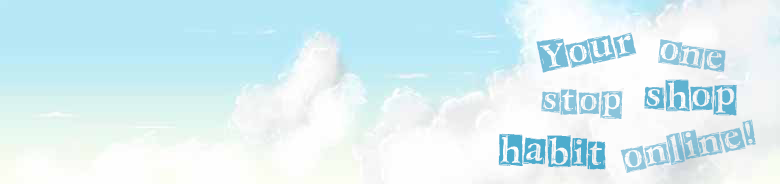
<style>
.page{position:relative;width:780px;height:184px}
.page>*{position:absolute;margin:0}
.t1{font:36px "CKScratchyBox";color:#78bcd7}
.t2{font:36px "CKScratchyBox";color:#8ac3d9}
.t3{font:32.9px "CKScratchyBox";color:#8ac4db}
.t4{font:36px "CKScratchyBox";color:#5eb2d0}
.t5{font:36px "CKScratchyBox";color:#8bc1d8}
.t6{font:36px "CKScratchyBox";color:#4daccd}
</style>
<div class="page">
<p class="t1" style="left:536px;top:32px;width:101px;height:41px;rotate:-12deg">Your</p>
<p class="t2" style="left:658px;top:39px;width:68px;height:34px;rotate:9deg">one</p>
<p class="t3" style="left:541px;top:88px;width:82px;height:31px;rotate:1deg">stop</p>
<p class="t4" style="left:644px;top:79px;width:93px;height:37px">shop</p>
<p class="t5" style="left:620px;top:119px;width:136px;height:54px;rotate:-11deg">online!</p>
<p class="t6" style="left:498px;top:133px;width:108px;height:37px;rotate:2deg">habit</p>
</div>
